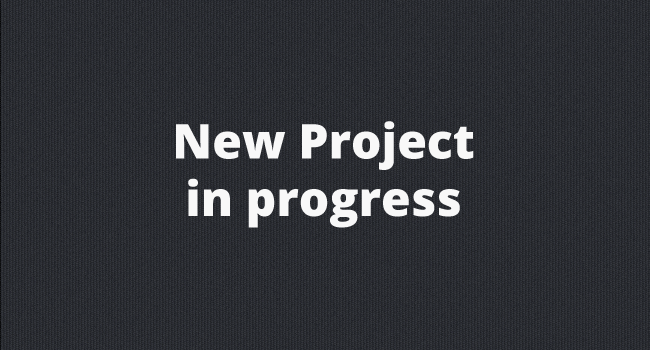
<style>
.page{position:relative;width:650px;height:350px}
.page>*{position:absolute;margin:0}
.t1{font:48px "OpenSans-Extrabold";color:#f8f8f8}
</style>
<div class="page">
<p class="t1" style="left:176px;top:121px;width:298px;height:107px;text-align:center">New Project<br>in progress</p>
</div>
